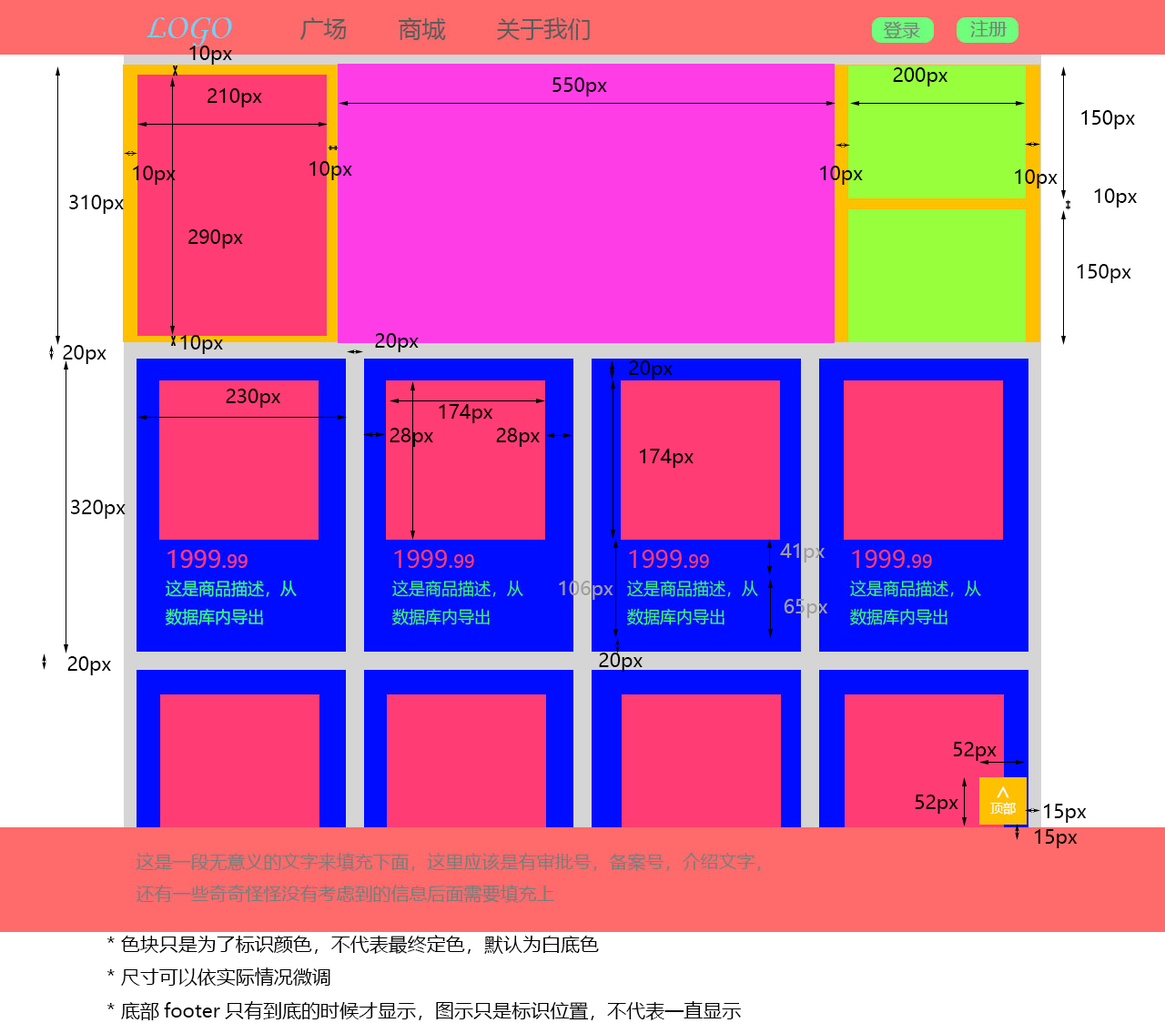
<style>
.page{position:relative;width:1165px;height:1023px;background:#ffffff}
.page>*{position:absolute;margin:0}
.t1{font:19.1px "MicrosoftYaHei";color:#000000}
.t2{font:19.1px "MicrosoftYaHei";color:#9e9e9e}
</style>
<div class="page">
<p class="t1" style="left:189px;top:46px;width:43px;height:19px">10px</p>
<p class="t1" style="left:553px;top:77px;width:54px;height:20px">550px</p>
<p class="t1" style="left:893px;top:67px;width:55px;height:19px">200px</p>
<p class="t1" style="left:208px;top:88px;width:54px;height:19px">210px</p>
<p class="t1" style="left:1082px;top:110px;width:53px;height:19px">150px</p>
<p class="t1" style="left:310px;top:161px;width:42px;height:19px">10px</p>
<p class="t1" style="left:133px;top:166px;width:43px;height:19px">10px</p>
<p class="t1" style="left:820px;top:166px;width:43px;height:19px">10px</p>
<p class="t1" style="left:1015px;top:169px;width:43px;height:19px">10px</p>
<p class="t1" style="left:69px;top:195px;width:55px;height:19px">310px</p>
<p class="t1" style="left:1094px;top:188px;width:43px;height:20px">10px</p>
<p class="t1" style="left:188px;top:229px;width:55px;height:20px">290px</p>
<p class="t1" style="left:1077px;top:264px;width:55px;height:19px">150px</p>
<p class="t1" style="left:180px;top:335px;width:43px;height:19px">10px</p>
<p class="t1" style="left:375px;top:333px;width:44px;height:19px">20px</p>
<p class="t1" style="left:63px;top:345px;width:44px;height:19px">20px</p>
<p class="t1" style="left:629px;top:361px;width:44px;height:19px">20px</p>
<p class="t1" style="left:226px;top:389px;width:54px;height:19px">230px</p>
<p class="t1" style="left:439px;top:404px;width:54px;height:19px">174px</p>
<p class="t1" style="left:390px;top:428px;width:43px;height:19px">28px</p>
<p class="t1" style="left:496px;top:428px;width:44px;height:19px">28px</p>
<p class="t1" style="left:640px;top:449px;width:54px;height:19px">174px</p>
<p class="t1" style="left:71px;top:500px;width:55px;height:19px">320px</p>
<p class="t2" style="left:780px;top:544px;width:45px;height:19px">41px</p>
<p class="t2" style="left:559px;top:581px;width:55px;height:19px">106px</p>
<p class="t2" style="left:784px;top:599px;width:44px;height:19px">65px</p>
<p class="t1" style="left:599px;top:653px;width:44px;height:19px">20px</p>
<p class="t1" style="left:67px;top:656px;width:44px;height:20px">20px</p>
<p class="t1" style="left:953px;top:742px;width:44px;height:19px">52px</p>
<p class="t1" style="left:915px;top:795px;width:44px;height:19px">52px</p>
<p class="t1" style="left:1044px;top:804px;width:43px;height:19px">15px</p>
<p class="t1" style="left:1035px;top:829px;width:43px;height:19px">15px</p>
<p class="t1" style="left:107px;top:935px;width:634px;height:86px">* 色块只是为了标识颜色，不代表最终定色，默认为白底色<br>* 尺寸可以依实际情况微调<br>* 底部footer只有到底的时候才显示，图示只是标识位置，不代表一直显示</p>
</div>
